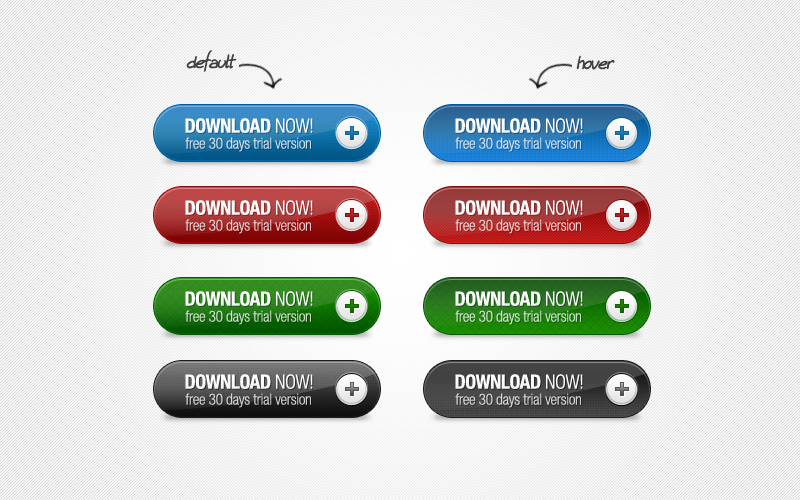
<style>
.page{position:relative;width:800px;height:500px}
.page>*{position:absolute;margin:0}
.t1{font:21.1px "Kuba_reczny_2005";letter-spacing:-0.02em;color:#404040}
.t2{font:19.5px "HelveticaNeueLTCom-BdCn";letter-spacing:-0.02em;color:#ffffff}
.t3{font:19.5px "HelveticaNeueLTCom-LtCn";letter-spacing:-0.02em;color:#ffffff}
.t4{font:15.3px "HelveticaNeueLTCom-LtCn";letter-spacing:-0.02em;color:#ccdde8}
.t5{font:15.3px "HelveticaNeueLTCom-LtCn";letter-spacing:-0.02em;color:#cee1ef}
.t6{font:15.3px "HelveticaNeueLTCom-LtCn";letter-spacing:-0.02em;color:#e6cccc}
.t7{font:15.3px "HelveticaNeueLTCom-LtCn";letter-spacing:-0.02em;color:#eccece}
.t8{font:15.3px "HelveticaNeueLTCom-LtCn";letter-spacing:-0.02em;color:#cbddca}
.t9{font:15.3px "HelveticaNeueLTCom-LtCn";letter-spacing:-0.02em;color:#cee2ca}
.t10{font:15.3px "HelveticaNeueLTCom-LtCn";letter-spacing:-0.02em;color:#d1d1d1}
.t11{font:15.3px "HelveticaNeueLTCom-LtCn";letter-spacing:-0.02em;color:#d5d5d5}
</style>
<div class="page">
<p class="t1" style="left:186px;top:50px;width:51px;height:22px">default</p>
<p class="t1" style="left:576px;top:55px;width:39px;height:15px">hover</p>
<p class="t2" style="left:185px;top:118px;width:128px;height:15px">DOWNLOAD <span class="t3">NOW!</span></p>
<p class="t2" style="left:455px;top:118px;width:128px;height:15px">DOWNLOAD <span class="t3">NOW!</span></p>
<p class="t4" style="left:185px;top:137px;width:126px;height:15px">free 30 days trial version</p>
<p class="t5" style="left:455px;top:137px;width:126px;height:15px">free 30 days trial version</p>
<p class="t2" style="left:185px;top:200px;width:128px;height:15px">DOWNLOAD <span class="t3">NOW!</span></p>
<p class="t2" style="left:455px;top:200px;width:128px;height:15px">DOWNLOAD <span class="t3">NOW!</span></p>
<p class="t6" style="left:185px;top:219px;width:126px;height:15px">free 30 days trial version</p>
<p class="t7" style="left:455px;top:219px;width:126px;height:15px">free 30 days trial version</p>
<p class="t2" style="left:185px;top:291px;width:128px;height:15px">DOWNLOAD <span class="t3">NOW!</span></p>
<p class="t2" style="left:455px;top:291px;width:128px;height:15px">DOWNLOAD <span class="t3">NOW!</span></p>
<p class="t8" style="left:185px;top:310px;width:126px;height:15px">free 30 days trial version</p>
<p class="t9" style="left:455px;top:310px;width:126px;height:15px">free 30 days trial version</p>
<p class="t2" style="left:185px;top:374px;width:128px;height:15px">DOWNLOAD <span class="t3">NOW!</span></p>
<p class="t2" style="left:455px;top:374px;width:128px;height:15px">DOWNLOAD <span class="t3">NOW!</span></p>
<p class="t10" style="left:185px;top:393px;width:126px;height:15px">free 30 days trial version</p>
<p class="t11" style="left:455px;top:393px;width:126px;height:15px">free 30 days trial version</p>
</div>
